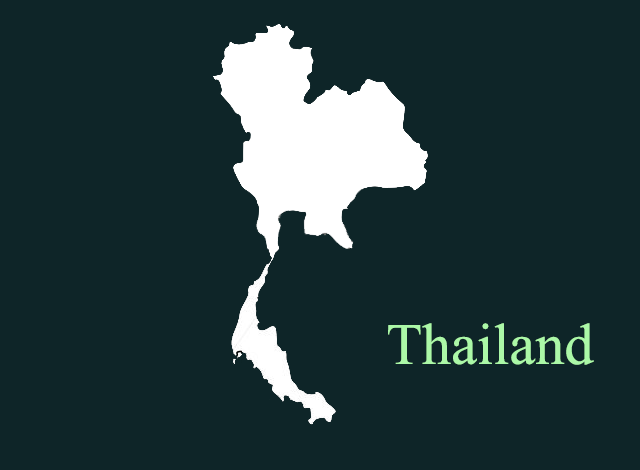
<style>
.page{position:relative;width:640px;height:470px;background:#0e2528}
.page>*{position:absolute;margin:0}
.t1{font:58.3px "TimesNewRomanPSMT";color:#abf8a7}
</style>
<div class="page">
<p class="t1" style="left:388px;top:323px;width:206px;height:42px">Thailand</p>
</div>
